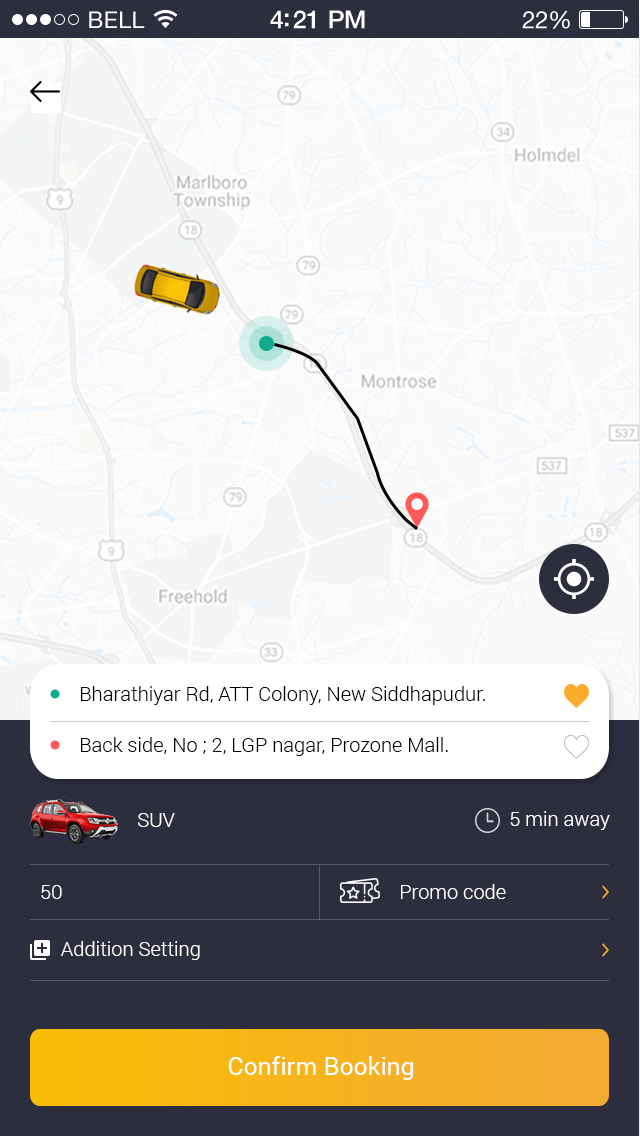
<style>
.page{position:relative;width:640px;height:1136px;background:#2c2e3d}
.page>*{position:absolute;margin:0}
.t1{font:20px "Roboto-Light";color:#000000}
.t2{font:20px "Roboto-Light";color:#010101}
.t3{font:20px "Roboto-Light";color:#ffffff;text-transform:uppercase}
.t4{font:20px "Roboto-Light";color:#ffffff}
.t5{font:25px "Roboto-Regular";color:#ffffff}
</style>
<div class="page">
<p class="t1" style="left:81px;top:686px;width:404px;height:19px">Bharathiyar Rd, ATT Colony, New Siddhapudur.</p>
<p class="t2" style="left:81px;top:737px;width:367px;height:19px">Back side, No ; 2, LGP nagar, Prozone Mall.</p>
<p class="t3" style="left:138px;top:813px;width:37px;height:14px">Suv</p>
<p class="t4" style="left:510px;top:811px;width:100px;height:19px">5 min away</p>
<p class="t4" style="left:41px;top:885px;width:21px;height:14px">₹ 50</p>
<p class="t4" style="left:401px;top:884px;width:105px;height:15px">Promo code</p>
<p class="t4" style="left:60px;top:941px;width:140px;height:19px">Addition Setting</p>
<p class="t5" style="left:228px;top:1056px;width:185px;height:24px">Confirm Booking</p>
</div>
